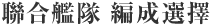
<style>
.page{position:relative;width:211px;height:25px;background:#ffffff}
.page>*{position:absolute;margin:0}
.t1{font:24px "RyuminPr6N-ExBold";letter-spacing:0.05em;color:#323232}
</style>
<div class="page">
<p class="t1" style="left:2px;top:1px;width:208px;height:24px">聯合艦隊 編成選擇</p>
</div>
